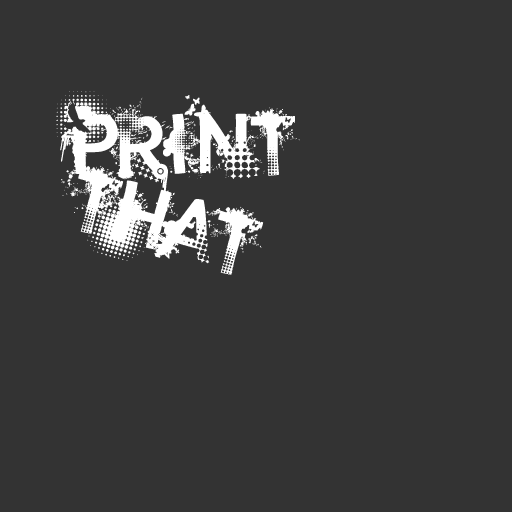
<style>
.page{position:relative;width:512px;height:512px;background:#333333}
.page>*{position:absolute;margin:0}
.t1{font:100px "trashco";color:#ffffff}
</style>
<div class="page">
<p class="t1" style="left:56px;top:91px;width:244px;height:122px">print</p>
<p class="t1" style="left:61px;top:165px;width:203px;height:110px;rotate:16deg">that</p>
</div>
